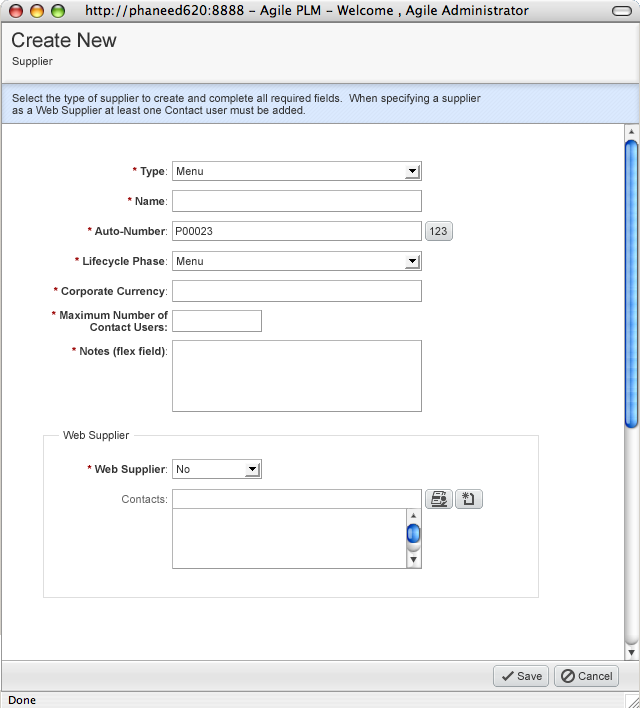
<style>
.page{position:relative;width:640px;height:709px;background:#ffffff}
.page>*{position:absolute;margin:0}
.t1{font:20px "ArialMT";color:#333333}
.t2{font:11px "ArialMT";color:#333333}
.t3{font:11px/12px "ArialMT";color:#333333}
.t4{font:11px "Arial-BoldMT";color:#333333}
.t5{font:11px "Arial-BoldMT";color:#990000}
.t6{font:11px "ArialMT";color:#666666}
.t7{font:11px/12px "Arial-BoldMT";color:#333333}
.t8{font:11px/30px "Arial-BoldMT";color:#990000}
.t9{font:11px/30px "Arial-BoldMT";color:#333333}
</style>
<div class="page">
<p class="t1" style="left:12px;top:32px;width:105px;height:16px">Create New</p>
<p class="t2" style="left:12px;top:57px;width:41px;height:11px">Supplier</p>
<p class="t3" style="left:12px;top:94px;width:469px;height:23px">Select the type of supplier to create and complete all required fields.  When specifying a supplier<br>as a Web Supplier at least one Contact user must be added.</p>
<p class="t4" style="left:132px;top:167px;width:35px;height:11px"><span class="t5">*</span> Type<span class="t6">:</span></p>
<p class="t2" style="left:177px;top:167px;width:26px;height:8px">Menu</p>
<p class="t4" style="left:127px;top:197px;width:40px;height:8px"><span class="t5">*</span> Name<span class="t6">:</span></p>
<p class="t4" style="left:87px;top:227px;width:80px;height:8px"><span class="t5">*</span> Auto-Number<span class="t6">:</span></p>
<p class="t2" style="left:176px;top:227px;width:37px;height:8px">P00023</p>
<p class="t2" style="left:430px;top:227px;width:17px;height:8px">123</p>
<p class="t4" style="left:75px;top:257px;width:92px;height:11px"><span class="t5">*</span> Lifecycle Phase<span class="t6">:</span></p>
<p class="t2" style="left:177px;top:257px;width:26px;height:8px">Menu</p>
<p class="t4" style="left:53px;top:287px;width:114px;height:11px"><span class="t5">*</span> Corporate Currency<span class="t6">:</span></p>
<p class="t7" style="left:51px;top:311px;width:117px;height:20px;text-align:right"><span class="t8">*</span><span class="t9"> Maxi</span>mum Number of<br>Contact Users:</p>
<p class="t4" style="left:72px;top:347px;width:95px;height:11px"><span class="t5">*</span> Notes (flex field)<span class="t6">:</span></p>
<p class="t2" style="left:63px;top:431px;width:67px;height:11px">Web Supplier</p>
<p class="t4" style="left:87px;top:465px;width:80px;height:11px"><span class="t5">*</span> Web Supplier<span class="t6">:</span></p>
<p class="t2" style="left:177px;top:465px;width:13px;height:8px">No</p>
<p class="t6" style="left:122px;top:495px;width:45px;height:8px">Contacts:</p>
<p class="t2" style="left:517px;top:672px;width:25px;height:8px">Save</p>
<p class="t2" style="left:578px;top:672px;width:34px;height:8px">Cancel</p>
</div>
